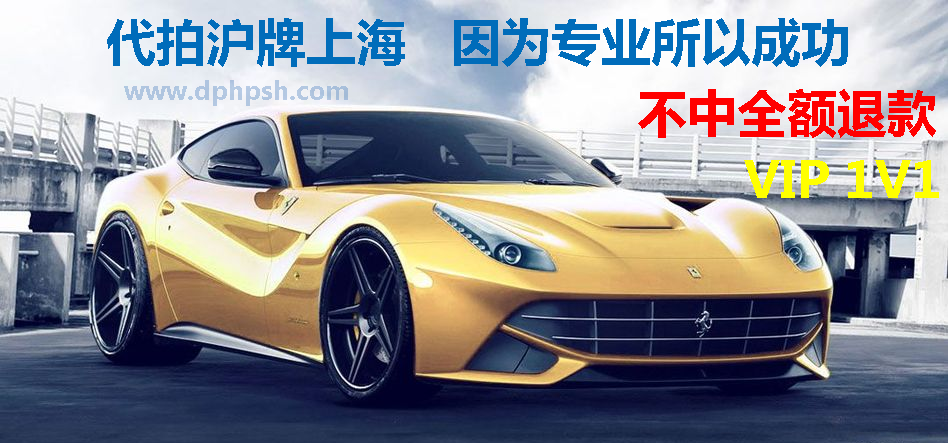
<style>
.page{position:relative;width:948px;height:443px}
.page>*{position:absolute;margin:0}
.t1{font:50px "MicrosoftYaHei-Bold";color:#006cba}
.t2{font:25px "MicrosoftYaHei-Bold";color:#b1c7e1}
.t3{font:50px "MicrosoftYaHei-Bold";color:#ff0000}
.t4{font:50px "MicrosoftYaHei-Bold";color:#ffff00}
</style>
<div class="page">
<p class="t1" style="left:107px;top:18px;width:741px;height:49px">代拍沪牌上海   因为专业所以成功</p>
<p class="t2" style="left:124px;top:80px;width:224px;height:26px">www.dphpsh.com</p>
<p class="t3" style="left:638px;top:89px;width:298px;height:49px">不中全额退款</p>
<p class="t4" style="left:744px;top:160px;width:195px;height:38px">VIP 1V1</p>
</div>
